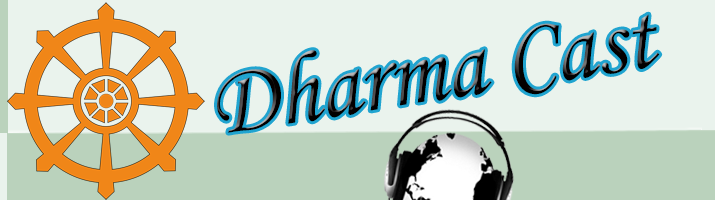
<style>
.page{position:relative;width:715px;height:200px;background:#eaf3ed}
.page>*{position:absolute;margin:0}
.t1{font:100px "MonotypeCorsiva";scale:0.96 1}
</style>
<div class="page">
<p class="t1" style="left:217px;top:14px;width:443px;height:119px;rotate:-9deg">Dharma Cast</p>
</div>
